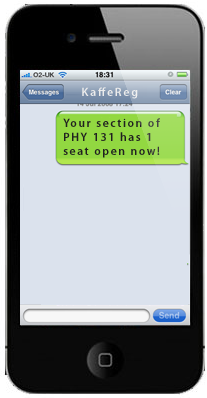
<style>
.page{position:relative;width:207px;height:398px;background:#dbe2ed}
.page>*{position:absolute;margin:0}
.t1{font:12px "MyriadPro-Semibold";letter-spacing:0.14em;color:#ececec}
.t2{font:12px "MyriadPro-Semibold";letter-spacing:0.14em;color:#202020;scale:0.96 1}
</style>
<div class="page">
<p class="t1" style="left:82px;top:87px;width:56px;height:12px">KaffeReg</p>
<p class="t2" style="left:63px;top:118px;width:97px;height:40px">Your section of<br>PHY 131 has 1<br>seat open now!</p>
</div>
